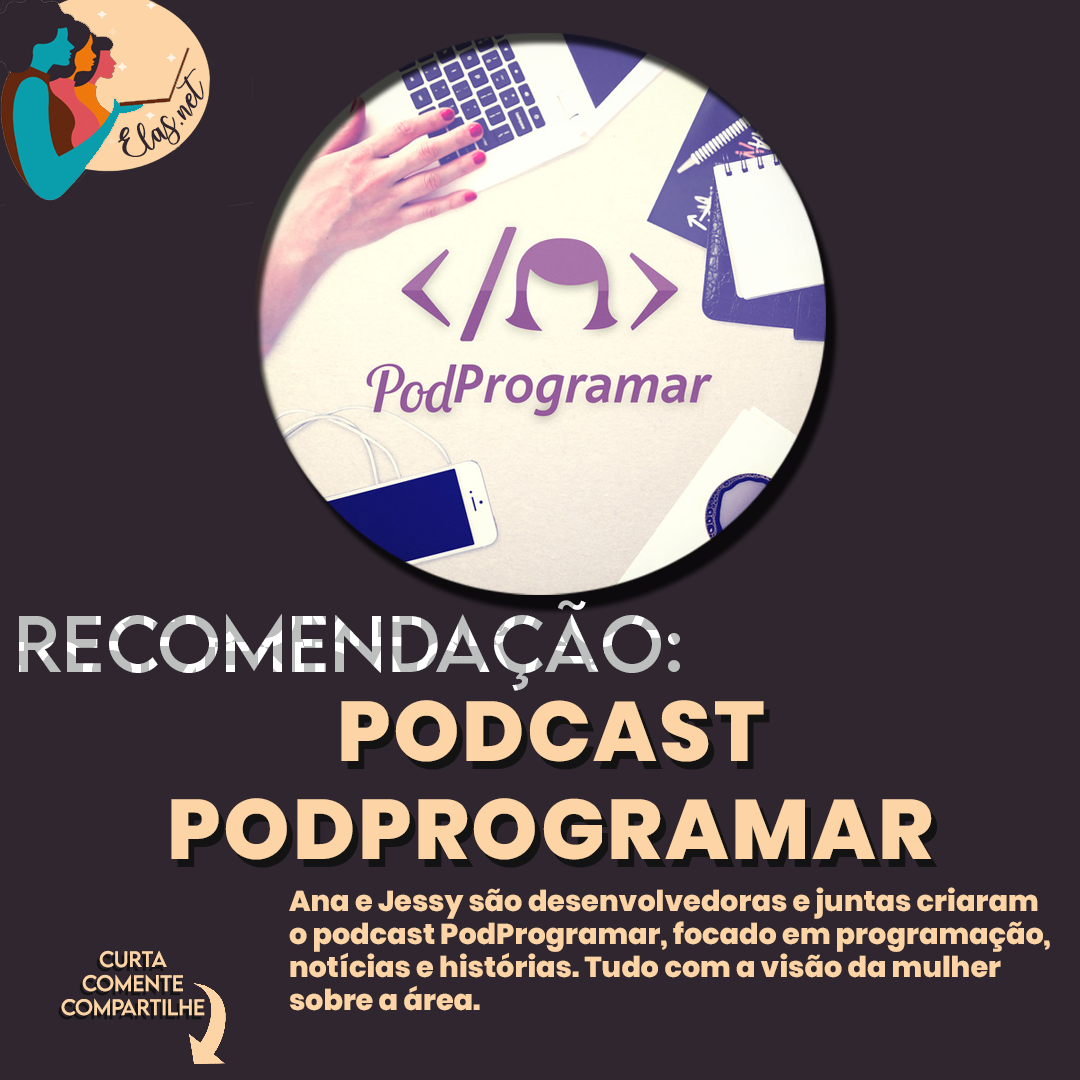
<style>
.page{position:relative;width:1080px;height:1080px;background:#2f262f}
.page>*{position:absolute;margin:0}
.t1{font:25px "charlinda-Regular";color:#2f262f;scale:1.18 1}
.t2{font:71.7px "LEMONMILK-Regular";letter-spacing:0.005em}
.t3{font:84.5px/98.3px "Poppins-ExtraBold";letter-spacing:0.03em;color:#fcd4a5}
.t4{font:84.5px/98.3px "Poppins-ExtraBold";letter-spacing:0.03em}
.t5{font:28.7px/33.2px "Poppins-ExtraBold";color:#fcd4a5}
.t6{font:20px "LEMONMILK-Regular";color:#fcd4a5}
</style>
<div class="page">
<p class="t1" style="left:118px;top:68px;width:86px;height:89px;rotate:-43deg">Elas.net</p>
<p class="t2" style="left:19px;top:600px;width:661px;height:91px">Recomendação:</p>
<p class="t3" style="left:171px;top:700px;width:761px;height:160px;text-align:center">PODCAST<br>PODPROGRAMAR</p>
<p class="t4" style="left:177px;top:708px;width:761px;height:160px;text-align:center">PODCAST<br>PODPROGRAMAR</p>
<p class="t5" style="left:289px;top:887px;width:761px;height:124px">Ana e Jessy são desenvolvedoras e juntas criaram <br>o podcast PodProgramar, focado em programação, <br>notícias e histórias. Tudo com a visão da mulher <br>sobre a área.</p>
<p class="t6" style="left:61px;top:950px;width:144px;height:66px;text-align:center">Curta<br>Comente<br>Compartilhe</p>
</div>
